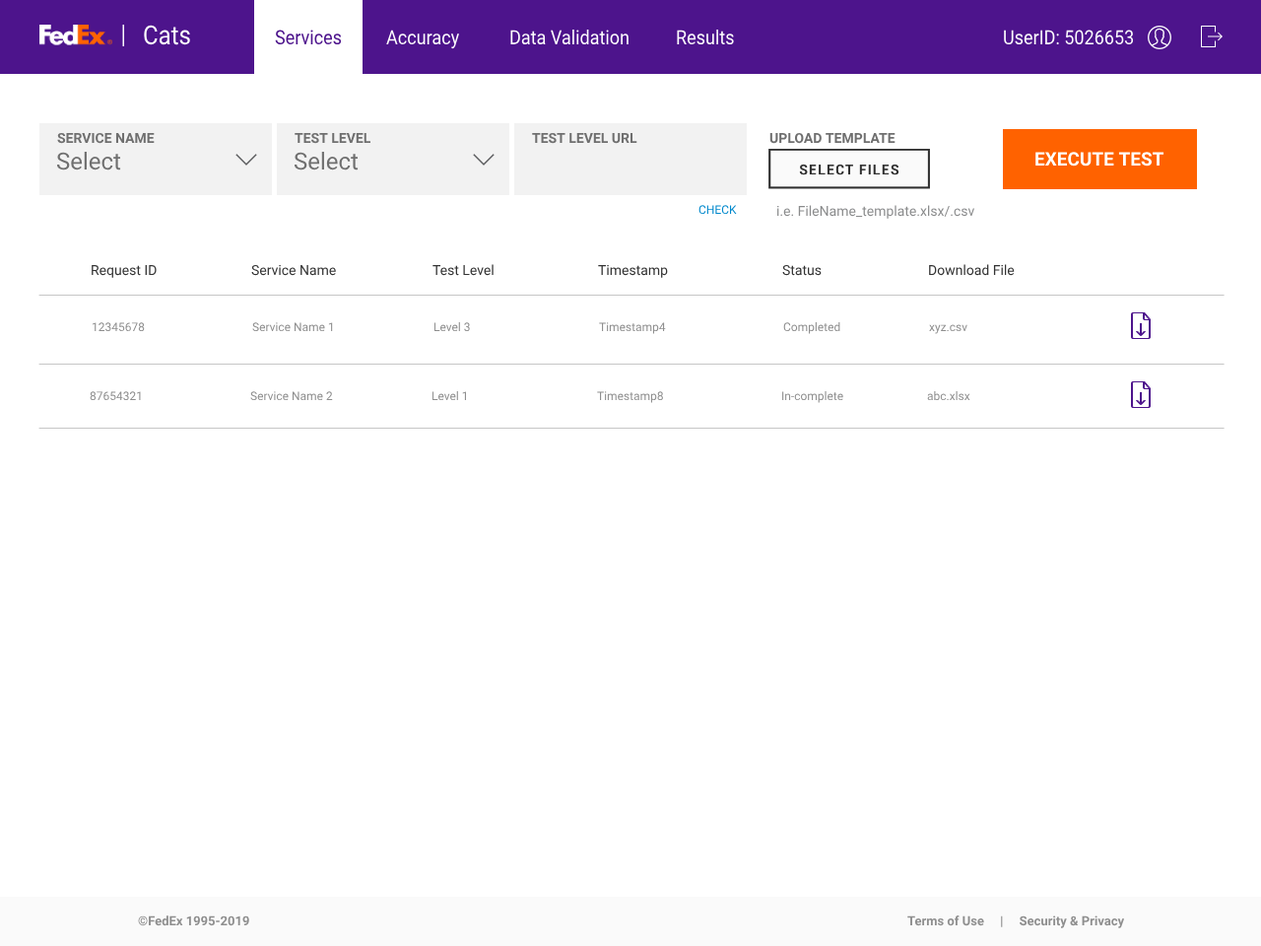
<style>
.page{position:relative;width:1261px;height:946px;background:#ffffff}
.page>*{position:absolute;margin:0}
.t1{font:26.1px "Roboto-Regular";color:#ffffff;scale:0.9 1}
.t2{font:19.7px "Roboto-Regular";color:#4d148c;scale:0.9 1}
.t3{font:19.7px "Roboto-Regular";color:#ffffff;scale:0.9 1}
.t4{font:13.8px "Roboto-Bold";color:#6f6f6f;text-transform:uppercase}
.t5{font:23.6px "Roboto-Regular";color:#6f6f6f}
.t6{font:18.7px "Roboto-Bold";color:#ffffff;text-transform:uppercase}
.t7{font:11.8px "Roboto-Regular";color:#0088cc}
.t8{font:13.8px "Roboto-Regular";color:#8a8b8c}
.t9{font:13.8px "Roboto-Regular";color:#333333}
.t10{font:11.8px "Roboto-Regular";color:#8e8e8e}
.t11{font:12.8px "Roboto-Bold";color:#8e8e8e}
</style>
<div class="page">
<p class="t1" style="left:144px;top:25px;width:46px;height:20px">Cats</p>
<p class="t2" style="left:275px;top:30px;width:67px;height:15px">Services</p>
<p class="t3" style="left:386px;top:30px;width:73px;height:19px">Accuracy</p>
<p class="t3" style="left:510px;top:29px;width:118px;height:16px">Data Validation</p>
<p class="t3" style="left:677px;top:29px;width:57px;height:16px">Results</p>
<p class="t3" style="left:1004px;top:30px;width:130px;height:15px">UserID: 5026653</p>
<p class="t4" style="left:57px;top:132px;width:98px;height:12px">Service Name</p>
<p class="t4" style="left:295px;top:132px;width:76px;height:12px">Test Level</p>
<p class="t4" style="left:532px;top:132px;width:105px;height:12px">Test Level URL</p>
<p class="t4" style="left:769px;top:132px;width:126px;height:12px">Upload Template</p>
<p class="t5" style="left:56px;top:152px;width:65px;height:18px">Select</p>
<p class="t5" style="left:294px;top:152px;width:65px;height:18px">Select</p>
<p class="t6" style="left:1035px;top:152px;width:129px;height:14px">Execute Test</p>
<p class="t7" style="left:698px;top:205px;width:39px;height:10px">CHECK</p>
<p class="t8" style="left:776px;top:205px;width:199px;height:14px">i.e. FileName_template.xlsx/.csv</p>
<p class="t9" style="left:92px;top:265px;width:65px;height:13px">Request ID</p>
<p class="t9" style="left:251px;top:264px;width:85px;height:12px">Service Name</p>
<p class="t9" style="left:432px;top:264px;width:62px;height:12px">Test Level</p>
<p class="t9" style="left:598px;top:264px;width:70px;height:14px">Timestamp</p>
<p class="t9" style="left:782px;top:264px;width:40px;height:12px">Status</p>
<p class="t9" style="left:929px;top:264px;width:86px;height:12px">Download File</p>
<p class="t10" style="left:92px;top:322px;width:53px;height:10px">12345678</p>
<p class="t10" style="left:252px;top:322px;width:81px;height:10px">Service Name 1</p>
<p class="t10" style="left:433px;top:322px;width:37px;height:10px">Level 3</p>
<p class="t10" style="left:599px;top:322px;width:67px;height:12px">Timestamp4</p>
<p class="t10" style="left:783px;top:322px;width:57px;height:12px">Completed</p>
<p class="t10" style="left:929px;top:324px;width:38px;height:10px">xyz.csv</p>
<p class="t10" style="left:90px;top:391px;width:51px;height:10px">87654321</p>
<p class="t10" style="left:250px;top:391px;width:83px;height:10px">Service Name 2</p>
<p class="t10" style="left:431px;top:391px;width:35px;height:10px">Level 1</p>
<p class="t10" style="left:597px;top:391px;width:66px;height:12px">Timestamp8</p>
<p class="t10" style="left:782px;top:391px;width:61px;height:12px">In-complete</p>
<p class="t10" style="left:927px;top:391px;width:43px;height:10px">abc.xlsx</p>
<p class="t11" style="left:138px;top:915px;width:111px;height:11px">©FedEx 1995-2019</p>
<p class="t11" style="left:907px;top:915px;width:218px;height:13px">Terms of Use     |     Security &amp; Privacy</p>
</div>
